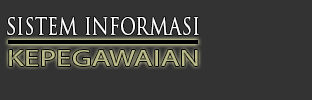
<style>
.page{position:relative;width:312px;height:100px;background:#333333}
.page>*{position:absolute;margin:0}
.t1{font:23.9px "TrajanPro-Regular";color:#ffffff;scale:0.76 1}
.t2{font:23px "MyriadPro-Regular";color:#bfbf8e;scale:1.36 1}
</style>
<div class="page">
<p class="t1" style="left:7px;top:16px;width:192px;height:19px">SISTEM INFORMASI</p>
<p class="t2" style="left:9px;top:50px;width:189px;height:16px">KEPEGAWAIAN</p>
</div>
